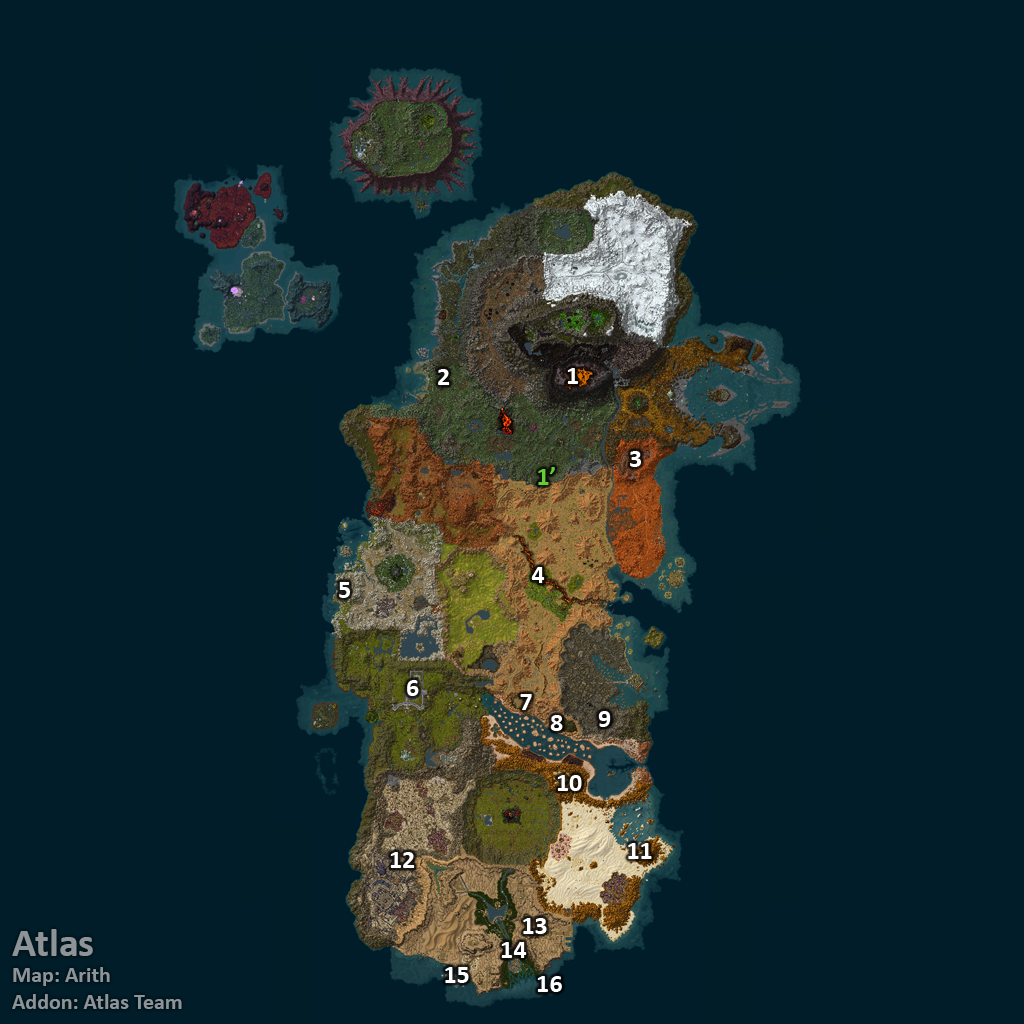
<style>
.page{position:relative;width:1024px;height:1024px;background:#001d29}
.page>*{position:absolute;margin:0}
.t1{font:26px "Calibri-Bold";color:#ffffff}
.t2{font:26px "Calibri-Bold";color:#66cc33}
.t3{font:22px "Calibri-Bold";color:#8d9397}
.t4{font:40px "Calibri-Bold";color:#8d9397}
</style>
<div class="page">
<p class="t1" style="left:438px;top:369px;width:12px;height:16px">2</p>
<p class="t1" style="left:567px;top:368px;width:11px;height:16px">1</p>
<p class="t1" style="left:630px;top:451px;width:11px;height:16px">3</p>
<p class="t2" style="left:538px;top:467px;width:17px;height:18px">1’</p>
<p class="t1" style="left:531px;top:567px;width:14px;height:16px">4</p>
<p class="t1" style="left:339px;top:582px;width:11px;height:16px">5</p>
<p class="t1" style="left:407px;top:680px;width:12px;height:16px">6</p>
<p class="t1" style="left:520px;top:694px;width:12px;height:16px">7</p>
<p class="t1" style="left:598px;top:711px;width:13px;height:16px">9</p>
<p class="t1" style="left:550px;top:715px;width:13px;height:16px">8</p>
<p class="t1" style="left:557px;top:775px;width:25px;height:16px">10</p>
<p class="t1" style="left:628px;top:843px;width:24px;height:16px">11</p>
<p class="t1" style="left:390px;top:852px;width:25px;height:16px">12</p>
<p class="t1" style="left:523px;top:918px;width:24px;height:16px">13</p>
<p class="t3" style="left:12px;top:929px;width:170px;height:80px"><span class="t4">Atlas<br></span>Map: Arith<br>Addon: Atlas Team</p>
<p class="t1" style="left:501px;top:942px;width:26px;height:16px">14</p>
<p class="t1" style="left:445px;top:967px;width:24px;height:16px">15</p>
<p class="t1" style="left:537px;top:976px;width:25px;height:16px">16</p>
</div>
